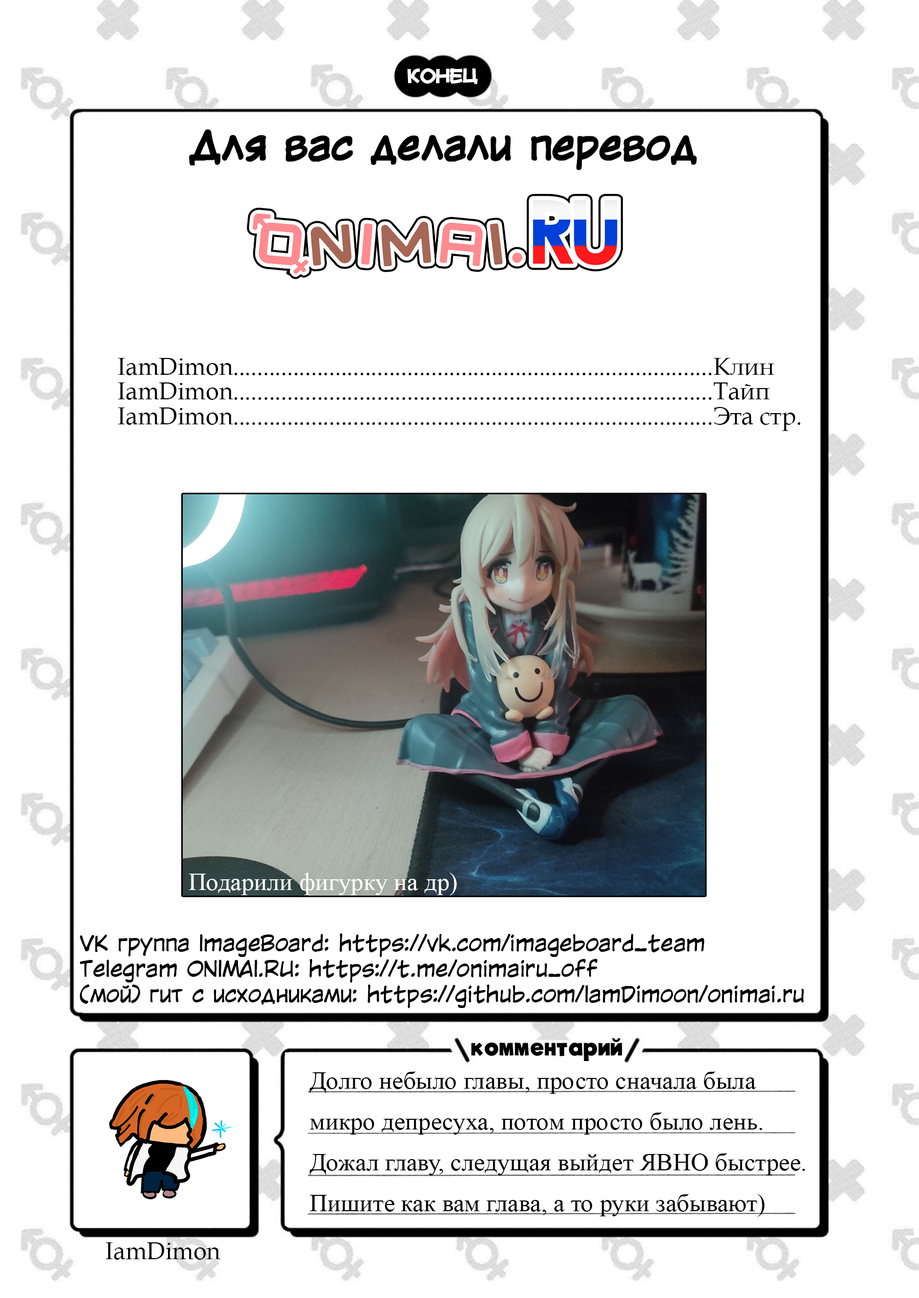
<style>
.page{position:relative;width:919px;height:1298px;background:#ffffff}
.page>*{position:absolute;margin:0}
.t1{font:17px "Mauryssel-Bold";color:#ffffff}
.t2{font:38.3px "KuraiVoice2";color:#000000;font-weight:bold}
.t3{font:24px/24.8px "BookAntiqua";color:#000000}
.t4{font:24.8px "TimesNewRomanPSMT";color:#ffffff}
.t5{font:21.3px/25.5px "KuraiVoice2";color:#000000}
.t6{font:21.3px/34px "MyriadPro-Regular";color:#000000}
.t7{font:63.8px/51px "ADomIno";color:#000000}
.t8{font:21.3px/23.4px "MyriadPro-Regular";color:#000000}
.t9{font:23.4px "MyFontBold";color:#000000}
.t10{font:24.8px/40.8px "TimesNewRomanPSMT";color:#000000}
.t11{font:24px "BookAntiqua";color:#000000}
</style>
<div class="page">
<p class="t1" style="left:407px;top:68px;width:71px;height:16px">конец</p>
<p class="t2" style="left:189px;top:130px;width:507px;height:40px">Для вас делали перевод</p>
<p class="t3" style="left:118px;top:358px;width:682px;height:73px">IamDimon................................................................................Клин<br>IamDimon................................................................................Тайп<br>IamDimon................................................................................Эта стр.</p>
<p class="t4" style="left:188px;top:872px;width:269px;height:23px">Подарили фигурку на др)</p>
<p class="t5" style="left:80px;top:933px;width:724px;height:75px"><span class="t6"><br><br><br><br><br><br><br><br><br></span><span class="t7"><br><br>                      <br></span><span class="t6"><br><br></span><span class="t8"><br><br><br><br><br><br><br><br><br><br></span><br>VK группа ImageBoard: https://vk.com/imageboard_team<br>Telegram ONIMAI.RU: https://t.me/onimairu_off<br>(мой) гит с исходниками: https://github.com/IamDimoon/onimai.ru<br><span class="t8"></span></p>
<p class="t9" style="left:471px;top:1038px;width:151px;height:23px">комментарий</p>
<p class="t10" style="left:309px;top:1071px;width:496px;height:146px">Долго небыло главы, просто сначала была <br>микро депресуха, потом просто было лень.<br>Дожал главу, следущая выйдет ЯВНО быстрее.<br>Пишите как вам глава, а то руки забывают)</p>
<p class="t11" style="left:106px;top:1242px;width:115px;height:17px">IamDimon</p>
</div>
